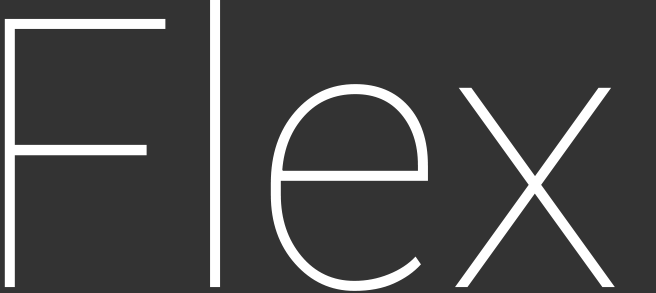
<style>
.page{position:relative;width:656px;height:293px;background:#333333}
.page>*{position:absolute;margin:0}
.t1{font:376.7px "Roboto-Thin";color:#ffffff}
</style>
<div class="page">
<p class="t1" style="left:4px;top:0px;width:611px;height:291px">Flex</p>
</div>
